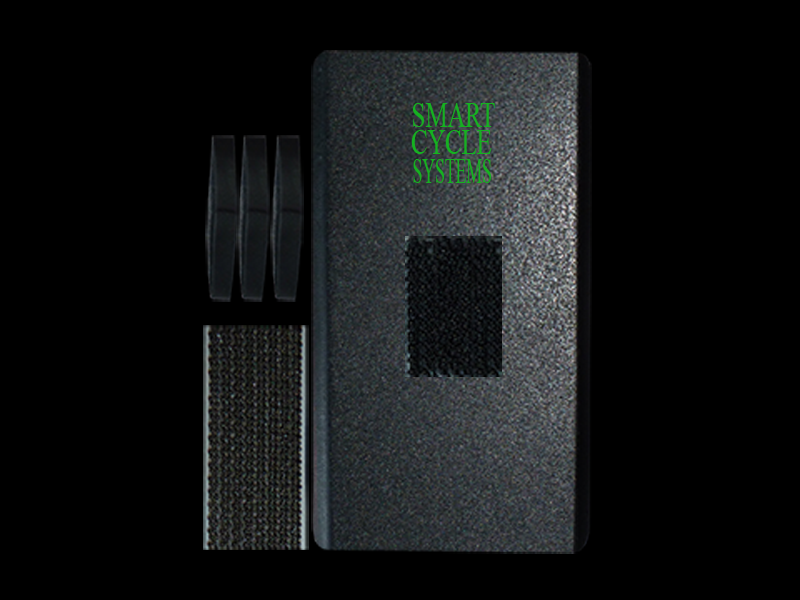
<style>
.page{position:relative;width:800px;height:600px;background:#000000}
.page>*{position:absolute;margin:0}
.t1{font:35.3px "TimesNewRomanPSMT";color:#16b121;scale:0.7 1}
.t2{font:35.3px "TimesNewRomanPSMT";color:#16b121}
.t3{font:35.3px "TimesNewRomanPSMT";color:#16b121;scale:0.5 1}
</style>
<div class="page">
<p class="t1" style="left:412px;top:103px;width:83px;height:24px"><span class="t2">  </span>SMART</p>
<p class="t1" style="left:411px;top:130px;width:81px;height:24px">CYCLE</p>
<p class="t3" style="left:413px;top:159px;width:79px;height:24px">SYSTEMS</p>
</div>
